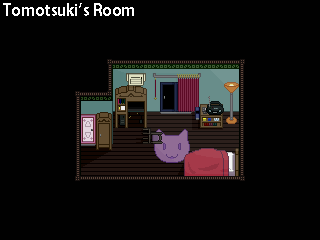
<style>
.page{position:relative;width:320px;height:240px;background:#010101}
.page>*{position:absolute;margin:0}
.t1{font:16px "KozGoPr6N-Bold";color:#ffffff}
</style>
<div class="page">
<p class="t1" style="left:3px;top:3px;width:131px;height:13px">Tomotsuki’s Room</p>
</div>
